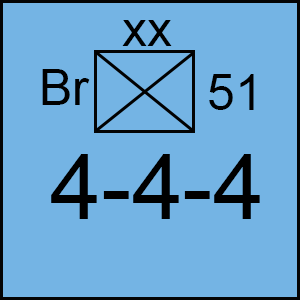
<style>
.page{position:relative;width:300px;height:300px;background:#74b4e4}
.page>*{position:absolute;margin:0}
.t1{font:50px "ArialMT";color:#000000}
.t2{font:91.7px "ArialMT";color:#000000}
</style>
<div class="page">
<p class="t1" style="left:122px;top:20px;width:50px;height:26px">xx</p>
<p class="t1" style="left:42px;top:69px;width:48px;height:36px">Br</p>
<p class="t1" style="left:209px;top:74px;width:45px;height:36px">51</p>
<p class="t2" style="left:51px;top:154px;width:209px;height:65px">4-4-4</p>
</div>
